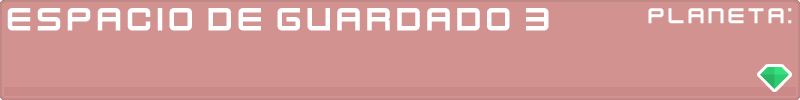
<style>
.page{position:relative;width:800px;height:100px;background:#d19290}
.page>*{position:absolute;margin:0}
.t1{font:36px "KenVector-Future";color:#ffffff}
.t2{font:24px "KenVector-Future";color:#ffffff}
</style>
<div class="page">
<p class="t1" style="left:7px;top:8px;width:542px;height:23px">espacio de guardado 3</p>
<p class="t2" style="left:648px;top:8px;width:144px;height:16px">planeta:</p>
</div>
